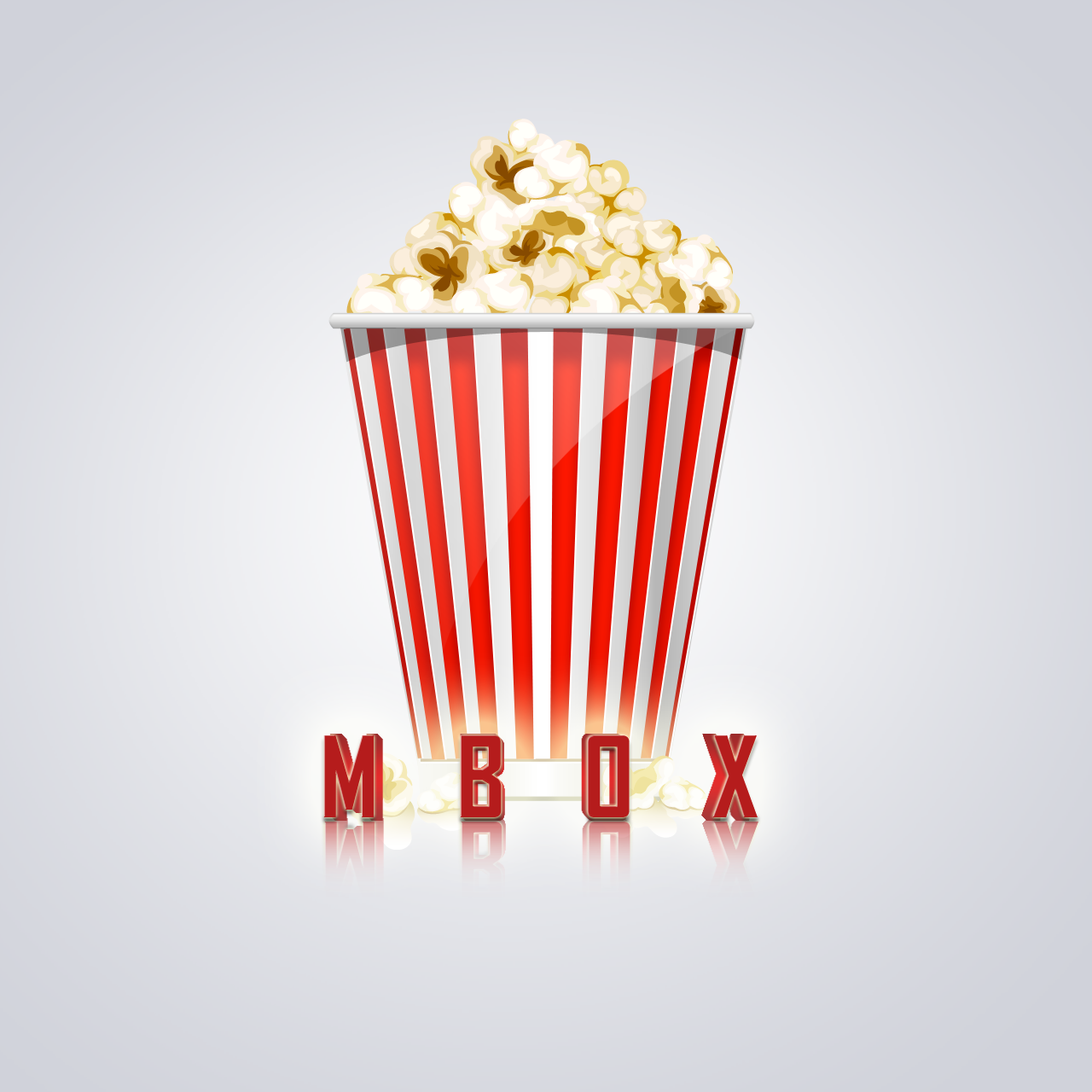
<style>
.page{position:relative;width:1092px;height:1092px}
.page>*{position:absolute;margin:0}
.t1{font:107.4px "AgencyFB-Bold";letter-spacing:0.72em;color:#b51c1c}
.t2{font:107.4px "AgencyFB-Bold";color:#b51c1c}
</style>
<div class="page">
<p class="t1" style="left:323px;top:735px;width:435px;height:82px">MBO<span class="t2">X</span></p>
</div>
